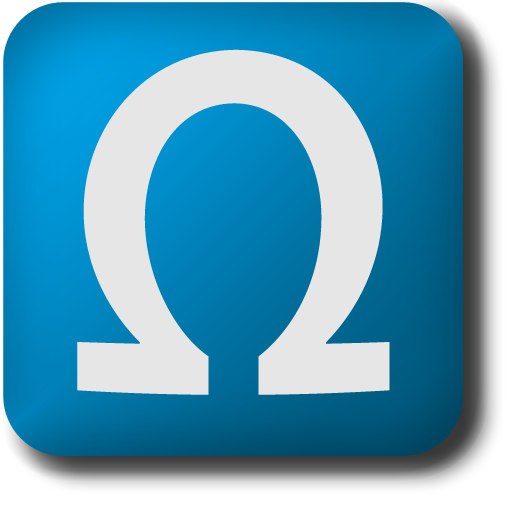
<style>
.page{position:relative;width:512px;height:512px;background:#e6e6e6}
.page>*{position:absolute;margin:0}
.t1{font:404px "AdobeGothicStd-Bold";color:#e6e6e6}
</style>
<div class="page">
<p class="t1" style="left:77px;top:49px;width:313px;height:346px">Ω</p>
</div>
